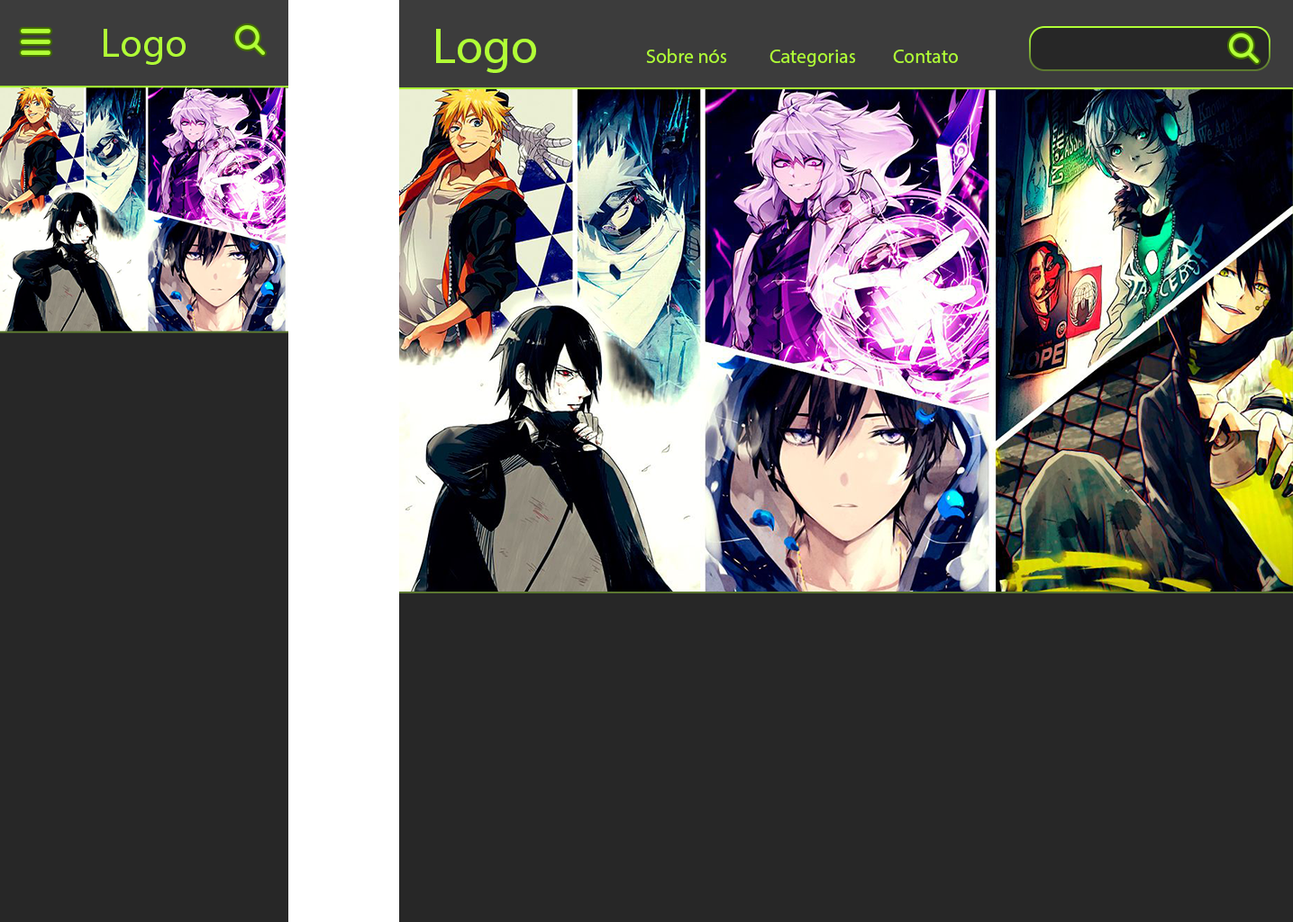
<style>
.page{position:relative;width:1293px;height:922px;background:#272727}
.page>*{position:absolute;margin:0}
.t1{font:40.4px "MyriadPro-Regular";color:#b1ff36}
.t2{font:49.9px "MyriadPro-Regular";color:#b1ff36}
.t3{font:19.6px "MyriadPro-Regular";color:#b1ff36}
</style>
<div class="page">
<p class="t1" style="left:104px;top:29px;width:82px;height:36px">Logo</p>
<p class="t2" style="left:436px;top:29px;width:100px;height:44px">Logo</p>
<p class="t3" style="left:646px;top:49px;width:81px;height:14px">Sobre nós</p>
<p class="t3" style="left:769px;top:50px;width:87px;height:17px">Categorias</p>
<p class="t3" style="left:893px;top:50px;width:65px;height:13px">Contato</p>
</div>
